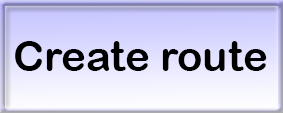
<style>
.page{position:relative;width:283px;height:113px}
.page>*{position:absolute;margin:0}
.t1{font:42px "ArialRoundedMTBold";color:#000000}
</style>
<div class="page">
<p class="t1" style="left:15px;top:41px;width:252px;height:30px">Create route</p>
</div>
